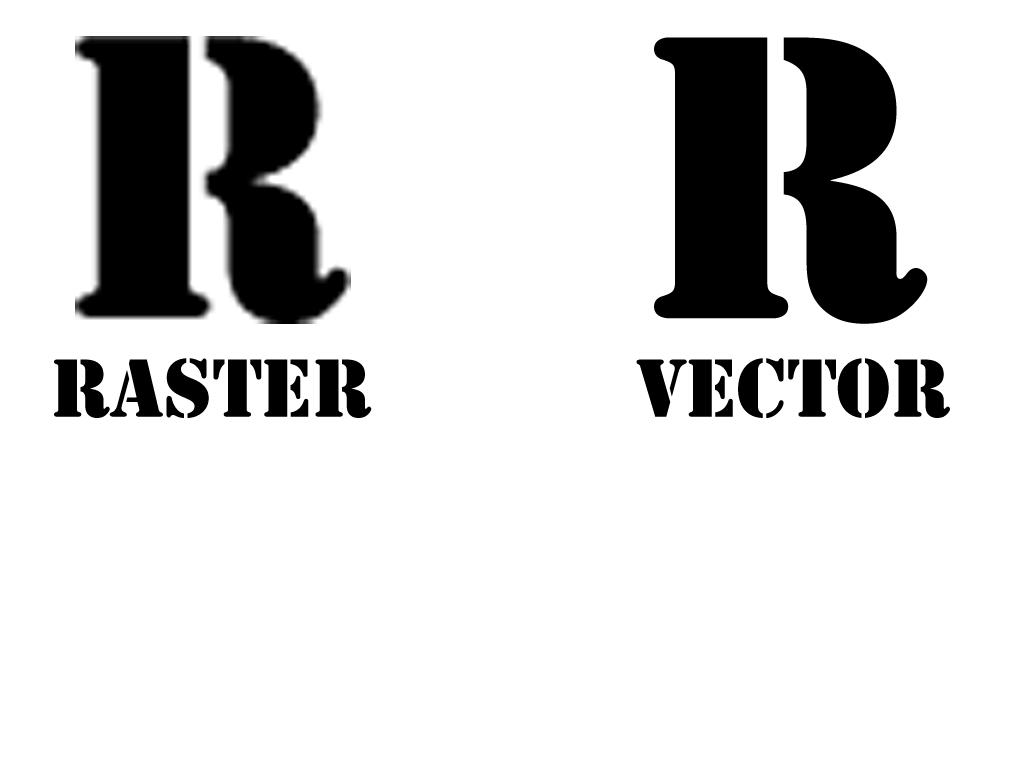
<style>
.page{position:relative;width:1024px;height:768px;background:#ffffff}
.page>*{position:absolute;margin:0}
.t1{font:375px "StencilStd";color:#000000}
.t2{font:76.6px "StencilStd";color:#000000}
</style>
<div class="page">
<p class="t1" style="left:654px;top:37px;width:274px;height:287px">R</p>
<p class="t2" style="left:54px;top:358px;width:318px;height:60px">Raster</p>
<p class="t2" style="left:636px;top:358px;width:314px;height:60px">Vector</p>
</div>
